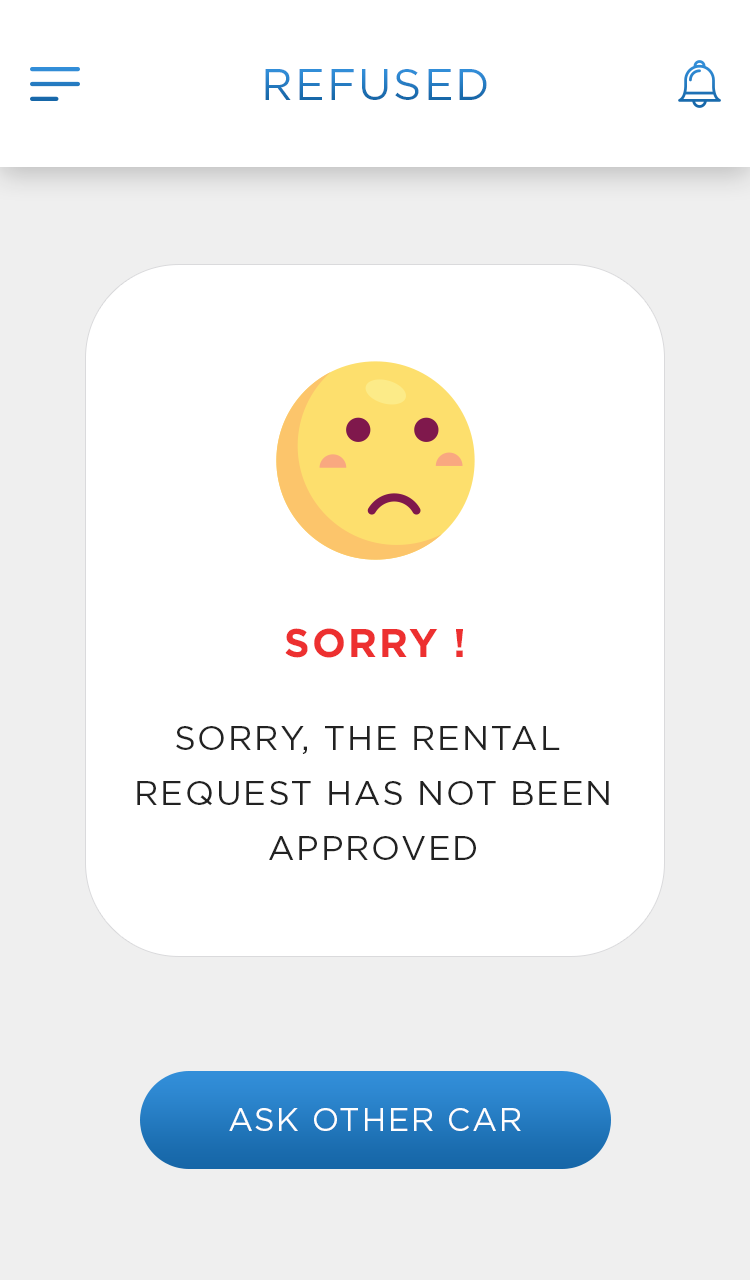
<style>
.page{position:relative;width:750px;height:1280px;background:#ffffff}
.page>*{position:absolute;margin:0}
.t1{font:44px "Gotham-Book";letter-spacing:0.05em;text-transform:uppercase}
.t2{font:40px "Gotham-Bold";letter-spacing:0.05em;color:#ed3030;text-transform:uppercase}
.t3{font:34px/55px "Gotham-Book";letter-spacing:0.05em;color:#222222;text-transform:uppercase}
.t4{font:32px "Gotham-Book";letter-spacing:0.05em;color:#fefefe;text-transform:uppercase}
</style>
<div class="page">
<p class="t1" style="left:265px;top:69px;width:222px;height:31px">REFUSED</p>
<p class="t2" style="left:285px;top:628px;width:178px;height:30px">SORRY !</p>
<p class="t3" style="left:137px;top:726px;width:472px;height:134px;text-align:center">Sorry, the rental<br> request has not been<br> approved</p>
<p class="t4" style="left:229px;top:1108px;width:292px;height:23px">ASK OTHER CAR</p>
</div>
